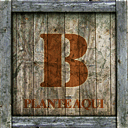
<style>
.page{position:relative;width:128px;height:128px}
.page>*{position:absolute;margin:0}
.t1{font:12.9px "TimesNewRomanPS-BoldMT";letter-spacing:-0.08em;color:#632f0d;text-transform:uppercase;font-weight:bold}
</style>
<div class="page">
<p class="t1" style="left:23px;top:99px;width:82px;height:12px">PLANTE AQUI</p>
</div>
